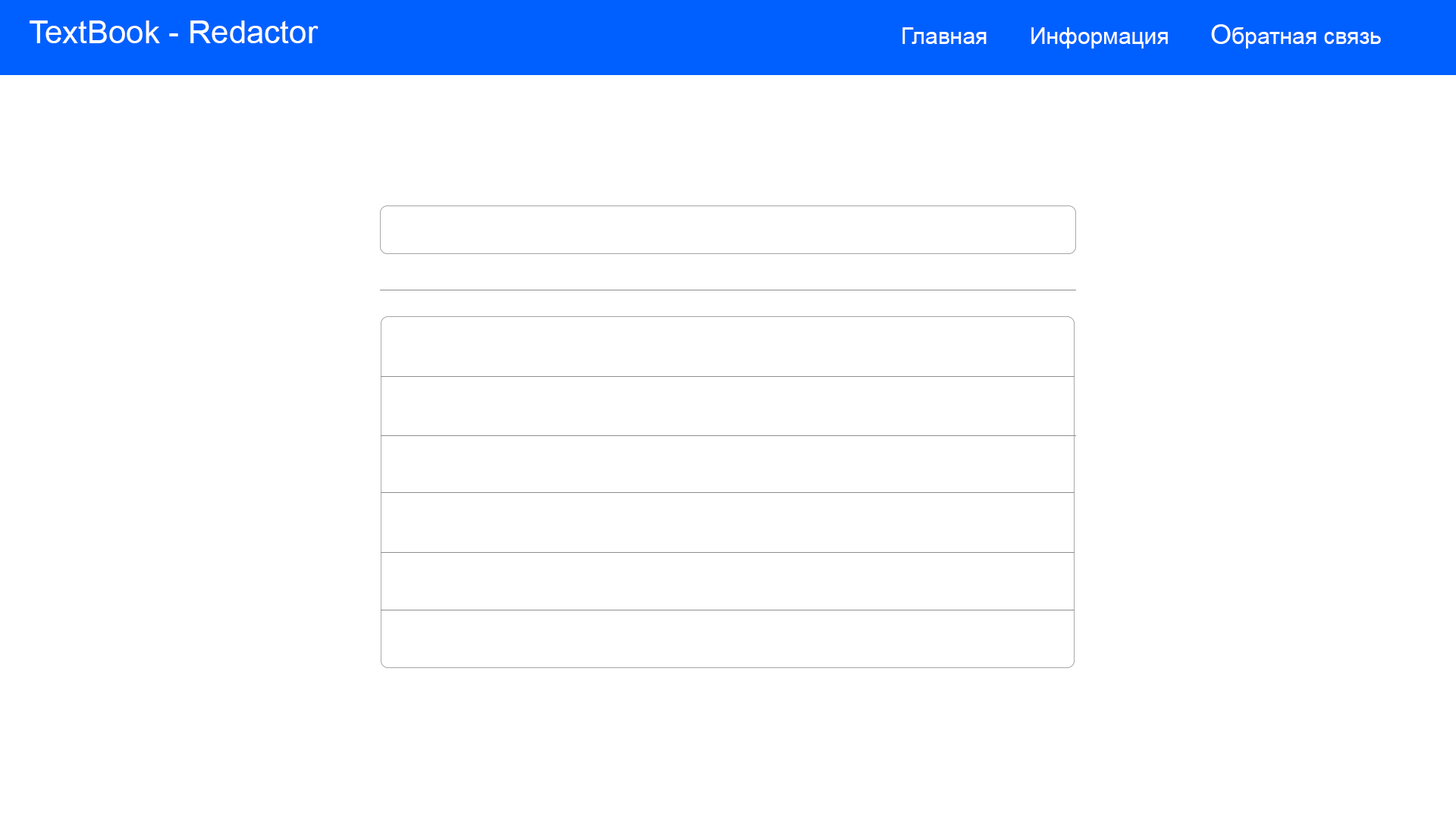
<style>
.page{position:relative;width:1456px;height:819px;background:#ffffff}
.page>*{position:absolute;margin:0}
.t1{font:31.8px "ArialMT";color:#ffffff}
.t2{font:22.7px "ArialMT";color:#ffffff}
.t3{font:27.3px "ArialMT";color:#ffffff}
</style>
<div class="page">
<p class="t1" style="left:30px;top:20px;width:288px;height:23px">TextBook - Redactor</p>
<p class="t2" style="left:902px;top:27px;width:85px;height:17px">Главная</p>
<p class="t2" style="left:1031px;top:27px;width:137px;height:22px">Информация</p>
<p class="t2" style="left:1211px;top:24px;width:170px;height:25px"><span class="t3">О</span>братная связь</p>
</div>
